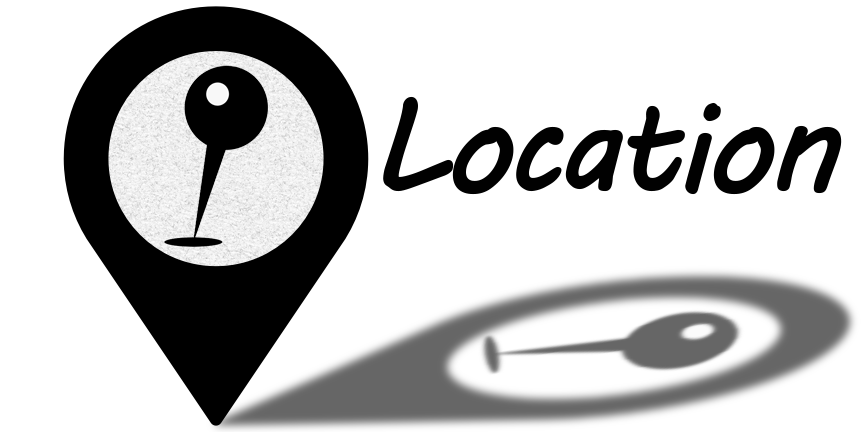
<style>
.page{position:relative;width:864px;height:432px;background:#ffffff}
.page>*{position:absolute;margin:0}
.t1{font:130px "MVBoli";letter-spacing:-0.05em;color:#010101;font-weight:bold}
</style>
<div class="page">
<p class="t1" style="left:383px;top:96px;width:459px;height:99px">Location</p>
</div>
